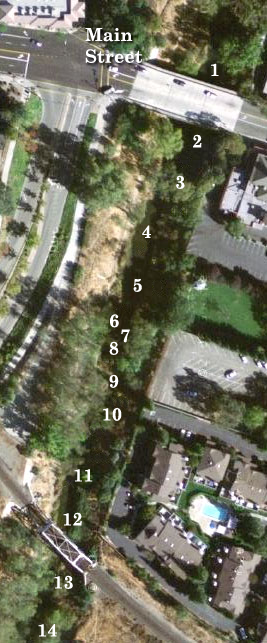
<style>
.page{position:relative;width:267px;height:643px}
.page>*{position:absolute;margin:0}
.t1{font:18px "CenturySchoolbook-Bold";color:#ffffff}
</style>
<div class="page">
<p class="t1" style="left:85px;top:28px;width:57px;height:35px">Main<br>Street</p>
<p class="t1" style="left:211px;top:63px;width:8px;height:13px">1</p>
<p class="t1" style="left:193px;top:134px;width:9px;height:14px">2</p>
<p class="t1" style="left:176px;top:175px;width:9px;height:14px">3</p>
<p class="t1" style="left:142px;top:225px;width:9px;height:13px">4</p>
<p class="t1" style="left:133px;top:278px;width:9px;height:14px">5</p>
<p class="t1" style="left:110px;top:314px;width:9px;height:14px">6</p>
<p class="t1" style="left:121px;top:329px;width:9px;height:14px">7</p>
<p class="t1" style="left:109px;top:341px;width:10px;height:14px">8</p>
<p class="t1" style="left:109px;top:374px;width:10px;height:14px">9</p>
<p class="t1" style="left:103px;top:407px;width:19px;height:14px">10</p>
<p class="t1" style="left:74px;top:469px;width:19px;height:13px">11</p>
<p class="t1" style="left:63px;top:512px;width:19px;height:14px">12</p>
<p class="t1" style="left:54px;top:575px;width:19px;height:14px">13</p>
<p class="t1" style="left:38px;top:624px;width:19px;height:13px">14</p>
</div>
